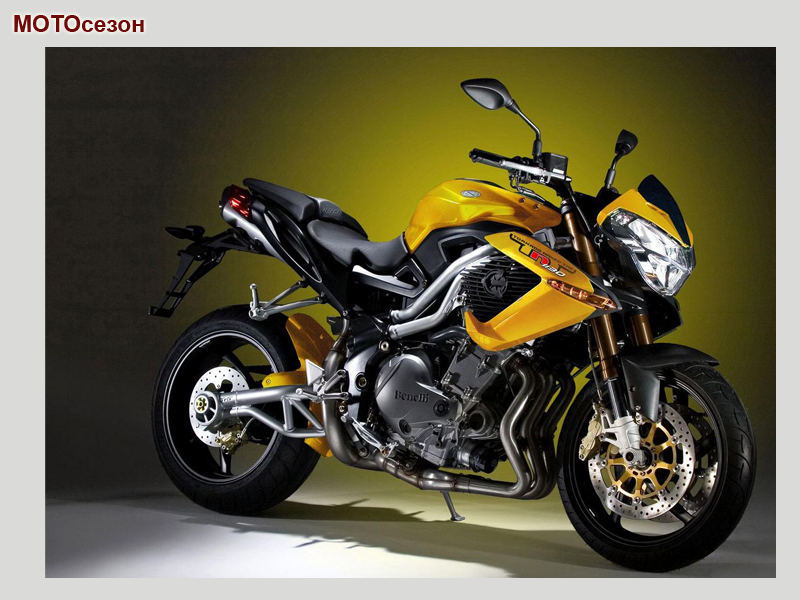
<style>
.page{position:relative;width:800px;height:600px}
.page>*{position:absolute;margin:0}
.t1{font:22.9px "Arial-BoldMT";color:#720909}
</style>
<div class="page">
<p class="t1" style="left:14px;top:15px;width:130px;height:17px">МОТОсезон</p>
</div>
